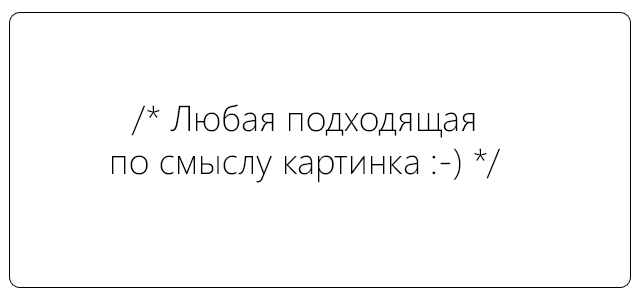
<style>
.page{position:relative;width:640px;height:300px;background:#ffffff}
.page>*{position:absolute;margin:0}
.t1{font:36px "SegoeUI-Light";color:#000000}
</style>
<div class="page">
<p class="t1" style="left:112px;top:104px;width:389px;height:79px;text-align:center">/* Любая подходящая<br>по смыслу картинка :-) */</p>
</div>
